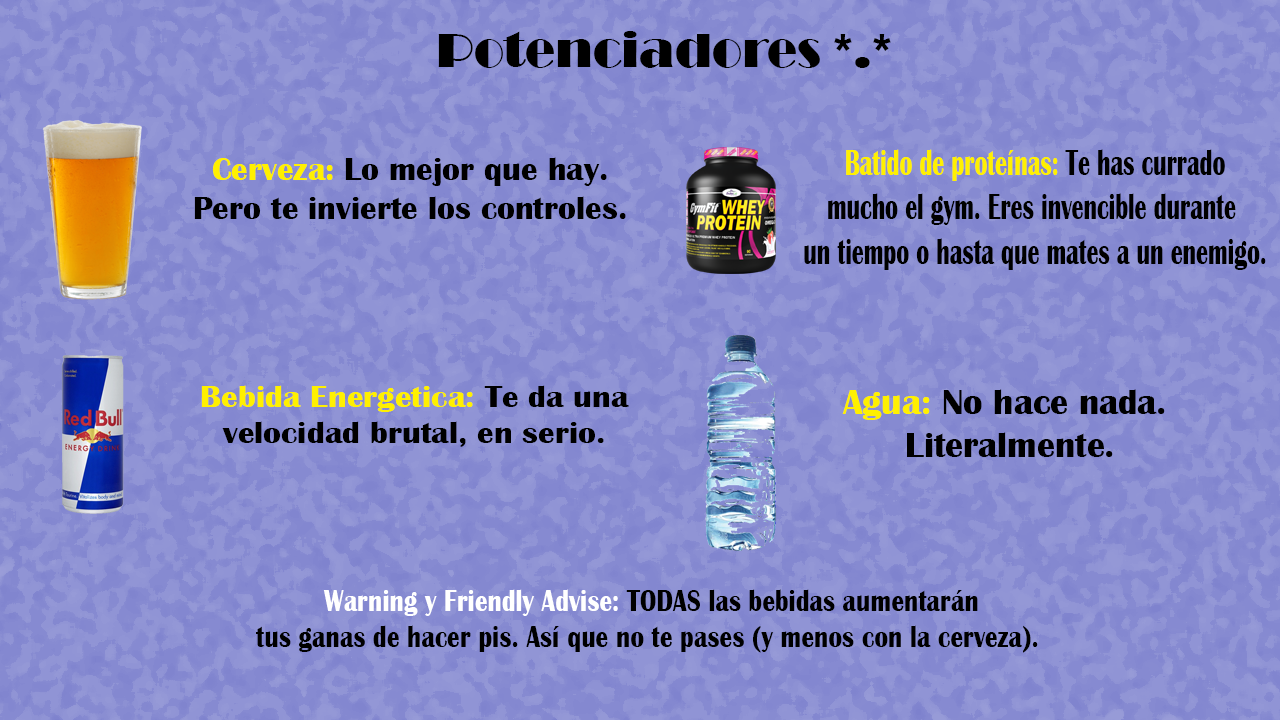
<style>
.page{position:relative;width:1280px;height:720px}
.page>*{position:absolute;margin:0}
.t1{font:12px "Broadway";color:#000000}
.t2{font:8.9px "BritannicBold";color:#000000;scale:0.64 1}
.t3{font:8.9px "BritannicBold";color:#fff000;scale:0.64 1}
.t4{font:7.9px "BritannicBold";color:#000000}
.t5{font:7.9px "BritannicBold";color:#fff000}
.t6{font:7.3px "BritannicBold";color:#000000;scale:1.08 1}
.t7{font:7.3px "BritannicBold";color:#fff000;scale:1.08 1}
.t8{font:8.6px "BritannicBold";color:#000000}
.t9{font:8.6px "BritannicBold";color:#fff000}
.t10{font:7.4px "BritannicBold";color:#000000;scale:0.83 1}
.t11{font:7.4px "BritannicBold";color:#ffffff;scale:0.83 1}
</style>
<div class="page">
<p class="t1" style="left:438px;top:31px;width:453px;height:37px;text-align:center">Potenciadores *.*</p>
<p class="t2" style="left:804px;top:149px;width:462px;height:121px;text-align:center"><span class="t3">Batido de proteínas: </span>Te has currado<br>mucho el gym. Eres invencible durante <br>un tiempo o hasta que mates a un enemigo.</p>
<p class="t4" style="left:194px;top:157px;width:432px;height:62px;text-align:center"><span class="t5">Cerveza: </span>Lo mejor que hay.<br>Pero te invierte los controles.</p>
<p class="t6" style="left:201px;top:385px;width:428px;height:62px;text-align:center"><span class="t7">Bebida Energetica:</span> Te da una<br>velocidad brutal, en serio.</p>
<p class="t8" style="left:842px;top:389px;width:323px;height:68px;text-align:center"><span class="t9">Agua: </span>No hace nada. <br>Literalmente.</p>
<p class="t10" style="left:256px;top:589px;width:782px;height:64px;text-align:center"><span class="t11">Warning y Friendly Advise:</span> TODAS las bebidas aumentarán<br>tus ganas de hacer pis. Así que no te pases (y menos con la cerveza).</p>
</div>
